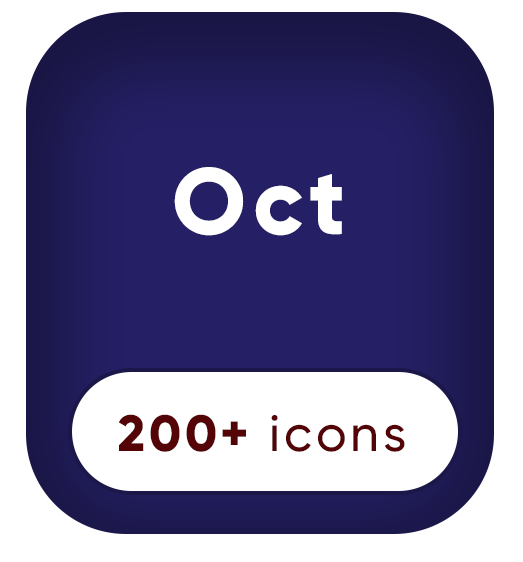
<style>
.page{position:relative;width:523px;height:562px;background:#ffffff}
.page>*{position:absolute;margin:0}
.t1{font:93.8px "Gilroy-ExtraBold";letter-spacing:0.075em;color:#ffffff}
.t2{font:50.9px "Gilroy-Medium";letter-spacing:0.075em;color:#540306}
.t3{font:50.9px "Gilroy-ExtraBold";letter-spacing:0.075em;color:#540306}
</style>
<div class="page">
<p class="t1" style="left:174px;top:167px;width:168px;height:69px">Oct</p>
<p class="t2" style="left:118px;top:414px;width:287px;height:38px"><span class="t3">200+ </span>icons</p>
</div>
